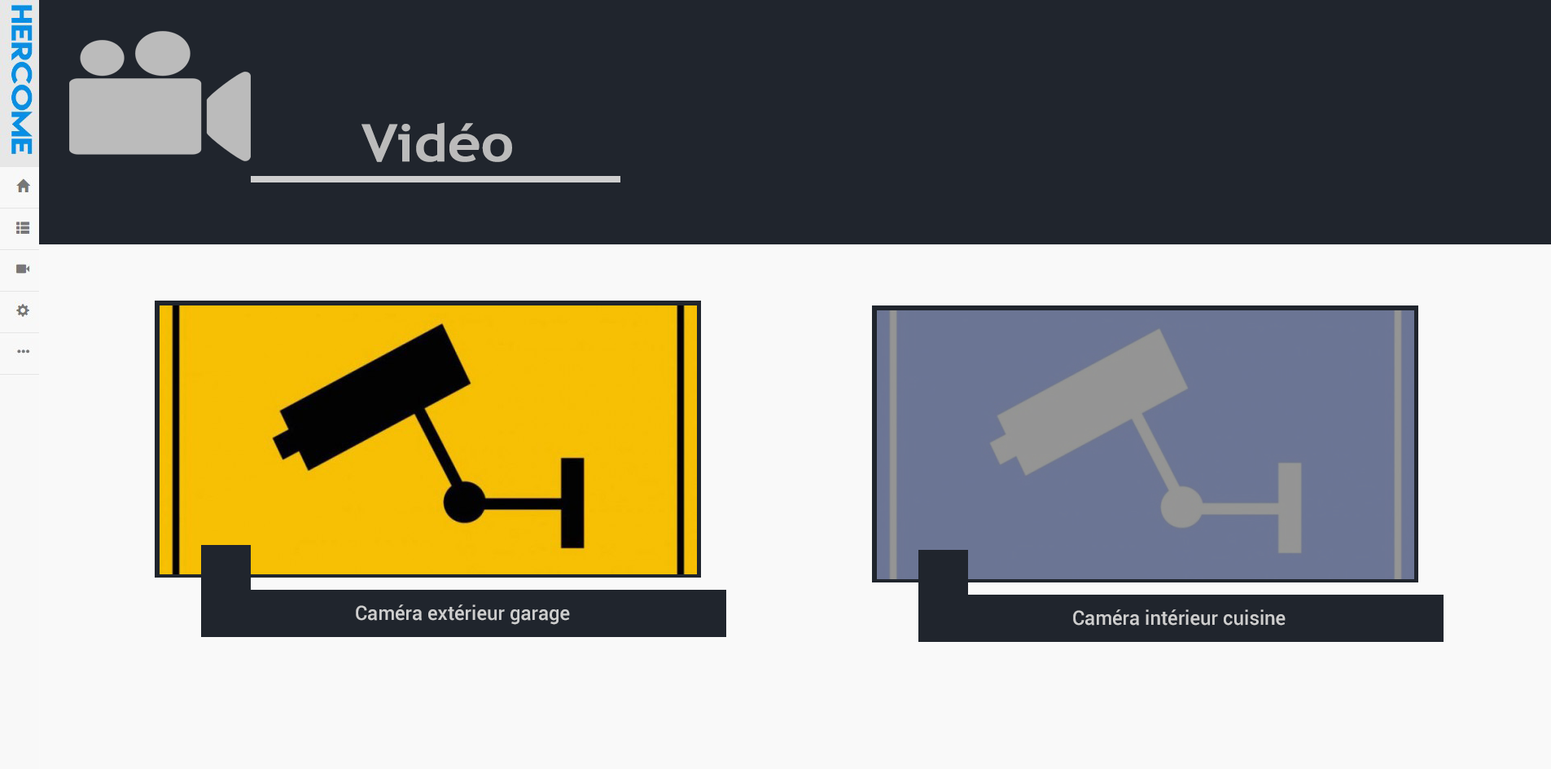
<style>
.page{position:relative;width:1551px;height:769px;background:#f9f9f9}
.page>*{position:absolute;margin:0}
.t1{font:51.5px "TrebuchetMS-Bold";color:#bbbbbb;scale:1.13 1}
.t2{font:19.5px "Roboto-Medium";color:#cecece}
</style>
<div class="page">
<p class="t1" style="left:362px;top:122px;width:150px;height:40px">Vidéo</p>
<p class="t2" style="left:356px;top:604px;width:214px;height:21px">Caméra extérieur garage</p>
<p class="t2" style="left:1073px;top:609px;width:213px;height:16px">Caméra intérieur cuisine</p>
</div>
